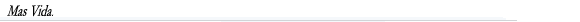
<style>
.page{position:relative;width:580px;height:22px;background:#ffffff}
.page>*{position:absolute;margin:0}
.t1{font:16.9px "Garamond";color:#000000;scale:0.71 1}
.t2{font:15.5px "MS Sans Serif";color:#000000;scale:0.71 1}
</style>
<div class="page">
<p class="t1" style="left:7px;top:5px;width:47px;height:12px">Mas Vida<span class="t2">.</span></p>
</div>
